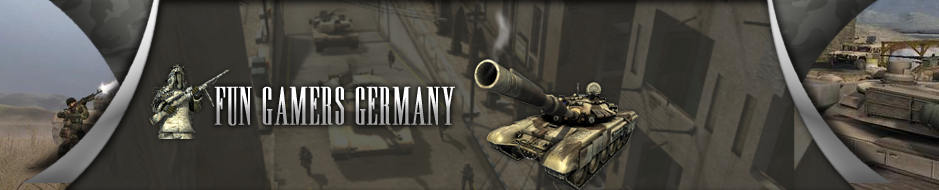
<style>
.page{position:relative;width:939px;height:190px}
.page>*{position:absolute;margin:0}
.t1{font:48px "Edition-Regular";font-weight:bold}
</style>
<div class="page">
<p class="t1" style="left:214px;top:86px;width:241px;height:40px">fun gamers germany</p>
</div>
